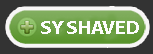
<style>
.page{position:relative;width:153px;height:54px;background:#333333}
.page>*{position:absolute;margin:0}
.t1{font:19.4px "MyriadPro-Bold";letter-spacing:-0.05em;color:#fdfdfd;text-transform:uppercase;scale:1.1 1}
</style>
<div class="page">
<p class="t1" style="left:41px;top:21px;width:98px;height:13px">sy shaved</p>
</div>
